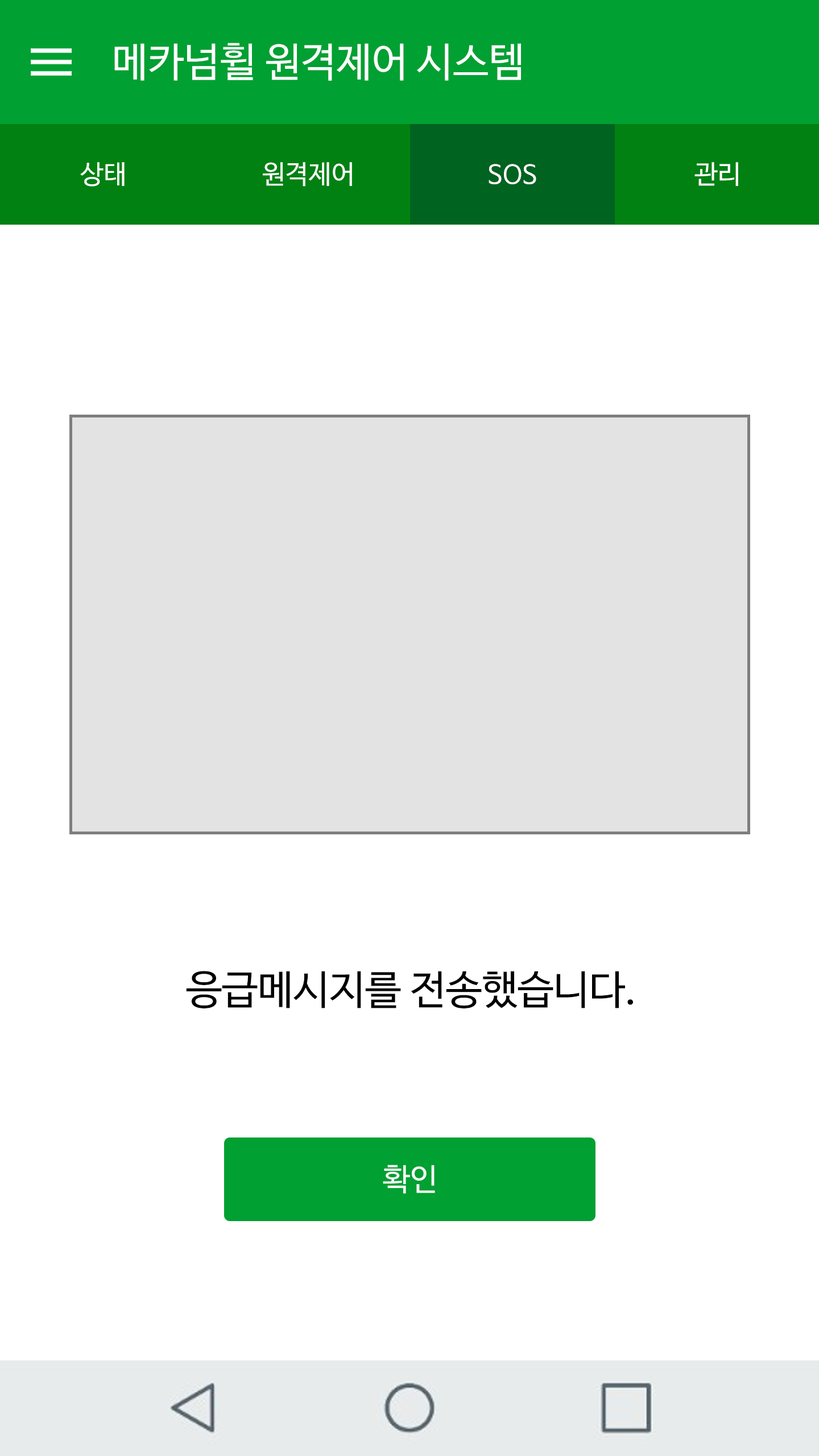
<style>
.page{position:relative;width:819px;height:1456px;background:#ffffff}
.page>*{position:absolute;margin:0}
.t1{font:40.3px "NanumBarunGothicOTF";color:#ffffff}
.t2{font:26.1px "NanumBarunGothicOTF";color:#ffffff}
.t3{font:40.3px "NanumBarunGothicOTF";color:#000000}
.t4{font:30.8px "NanumBarunGothicOTF";color:#ffffff}
</style>
<div class="page">
<p class="t1" style="left:114px;top:43px;width:407px;height:38px">메카넘휠 원격제어 시스템</p>
<p class="t2" style="left:80px;top:162px;width:45px;height:25px">상태</p>
<p class="t2" style="left:263px;top:162px;width:89px;height:25px">원격제어</p>
<p class="t2" style="left:489px;top:164px;width:47px;height:20px">SOS</p>
<p class="t2" style="left:694px;top:162px;width:44px;height:24px">관리</p>
<p class="t3" style="left:186px;top:971px;width:447px;height:37px">응급메시지를 전송했습니다.</p>
<p class="t4" style="left:383px;top:1165px;width:52px;height:29px">확인</p>
</div>
